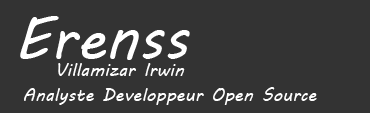
<style>
.page{position:relative;width:370px;height:113px;background:#333333}
.page>*{position:absolute;margin:0}
.t1{font:60px "MVBoli";color:#ffffff}
.t2{font:18px "MVBoli";color:#ffffff}
</style>
<div class="page">
<p class="t1" style="left:20px;top:16px;width:170px;height:44px">Erenss</p>
<p class="t2" style="left:58px;top:63px;width:127px;height:13px">Villamizar Irwin</p>
<p class="t2" style="left:24px;top:87px;width:293px;height:18px">Analyste Developpeur Open Source</p>
</div>
